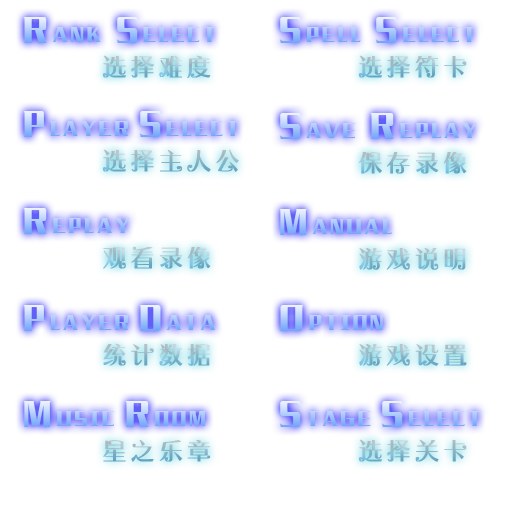
<style>
.page{position:relative;width:512px;height:512px;background:#ffffff}
.page>*{position:absolute;margin:0}
.t1{font:18.7px "MFYiHei_Noncommercial-Regular";letter-spacing:0.15em}
.t2{font:32px "MFYiHei_Noncommercial-Regular";letter-spacing:0.15em}
.t3{font:24px "MYoyoPRC-Medium";letter-spacing:0.15em;font-weight:bold}
</style>
<div class="page">
<p class="t1" style="left:23px;top:17px;width:193px;height:26px"><span class="t2">R</span>ANK <span class="t2">S</span>ELECT</p>
<p class="t1" style="left:279px;top:17px;width:197px;height:26px"><span class="t2">S</span>PELL <span class="t2">S</span>ELECT</p>
<p class="t3" style="left:102px;top:55px;width:109px;height:23px">选择难度</p>
<p class="t3" style="left:358px;top:55px;width:109px;height:23px">选择符卡</p>
<p class="t1" style="left:24px;top:111px;width:215px;height:26px"><span class="t2">P</span>LAYER <span class="t2">S</span>ELECT</p>
<p class="t1" style="left:279px;top:113px;width:198px;height:26px"><span class="t2">S</span>AVE <span class="t2">R</span>EPLAY</p>
<p class="t3" style="left:102px;top:149px;width:137px;height:23px">选择主人公</p>
<p class="t3" style="left:358px;top:152px;width:109px;height:22px">保存录像</p>
<p class="t1" style="left:23px;top:208px;width:107px;height:26px"><span class="t2">R</span>EPLAY</p>
<p class="t3" style="left:103px;top:246px;width:108px;height:23px">观看录像</p>
<p class="t3" style="left:359px;top:248px;width:107px;height:22px">游戏说明</p>
<p class="t1" style="left:24px;top:305px;width:192px;height:26px"><span class="t2">P</span>LAYER <span class="t2">D</span>ATA</p>
<p class="t3" style="left:103px;top:343px;width:108px;height:23px">统计数据</p>
<p class="t3" style="left:359px;top:344px;width:108px;height:22px">游戏设置</p>
<p class="t1" style="left:279px;top:401px;width:202px;height:26px"><span class="t2">S</span>TAGE <span class="t2">S</span>ELECT</p>
<p class="t3" style="left:103px;top:440px;width:108px;height:22px">星之乐章</p>
<p class="t3" style="left:358px;top:439px;width:109px;height:23px">选择关卡</p>
</div>
